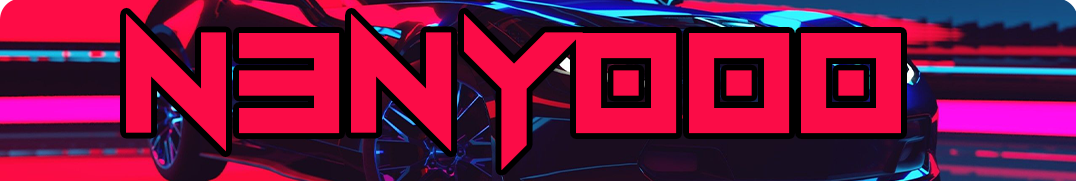
<style>
.page{position:relative;width:1076px;height:181px;background:#fb0c47}
.page>*{position:absolute;margin:0}
.t1{font:200px "Vermin-Vibes";color:#fb0c47}
</style>
<div class="page">
<p class="t1" style="left:126px;top:13px;width:775px;height:157px">N3NY000</p>
</div>
